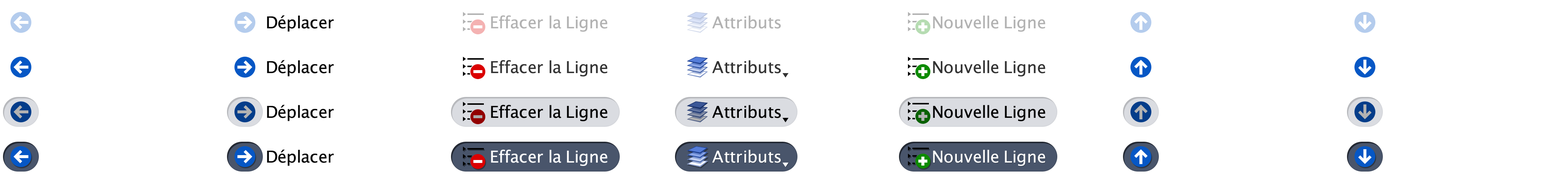
<style>
.page{position:relative;width:1568px;height:179px;background:#ffffff}
.page>*{position:absolute;margin:0}
.t1{font:16.4px "LucidaGrande";letter-spacing:-0.01em;color:#000000}
.t2{font:16.4px "LucidaGrande";letter-spacing:-0.01em;color:#b2b2b2}
.t3{font:16.4px "LucidaGrande";letter-spacing:-0.01em;color:#333333}
.t4{font:16.4px "LucidaGrande";letter-spacing:-0.01em;color:#ffffff}
</style>
<div class="page">
<p class="t1" style="left:267px;top:15px;width:67px;height:17px">Déplacer</p>
<p class="t2" style="left:491px;top:15px;width:116px;height:17px">Effacer la Ligne</p>
<p class="t2" style="left:712px;top:15px;width:69px;height:14px">Attributs</p>
<p class="t2" style="left:933px;top:15px;width:112px;height:17px">Nouvelle Ligne</p>
<p class="t1" style="left:267px;top:60px;width:67px;height:17px">Déplacer</p>
<p class="t3" style="left:491px;top:60px;width:116px;height:17px">Effacer la Ligne</p>
<p class="t3" style="left:712px;top:60px;width:69px;height:14px">Attributs</p>
<p class="t3" style="left:933px;top:60px;width:112px;height:17px">Nouvelle Ligne</p>
<p class="t1" style="left:267px;top:105px;width:67px;height:16px">Déplacer</p>
<p class="t1" style="left:491px;top:105px;width:116px;height:16px">Effacer la Ligne</p>
<p class="t1" style="left:712px;top:105px;width:69px;height:13px">Attributs</p>
<p class="t1" style="left:933px;top:105px;width:112px;height:16px">Nouvelle Ligne</p>
<p class="t1" style="left:267px;top:150px;width:67px;height:16px">Déplacer</p>
<p class="t4" style="left:491px;top:150px;width:116px;height:16px">Effacer la Ligne</p>
<p class="t4" style="left:712px;top:150px;width:69px;height:13px">Attributs</p>
<p class="t4" style="left:933px;top:150px;width:112px;height:16px">Nouvelle Ligne</p>
</div>
